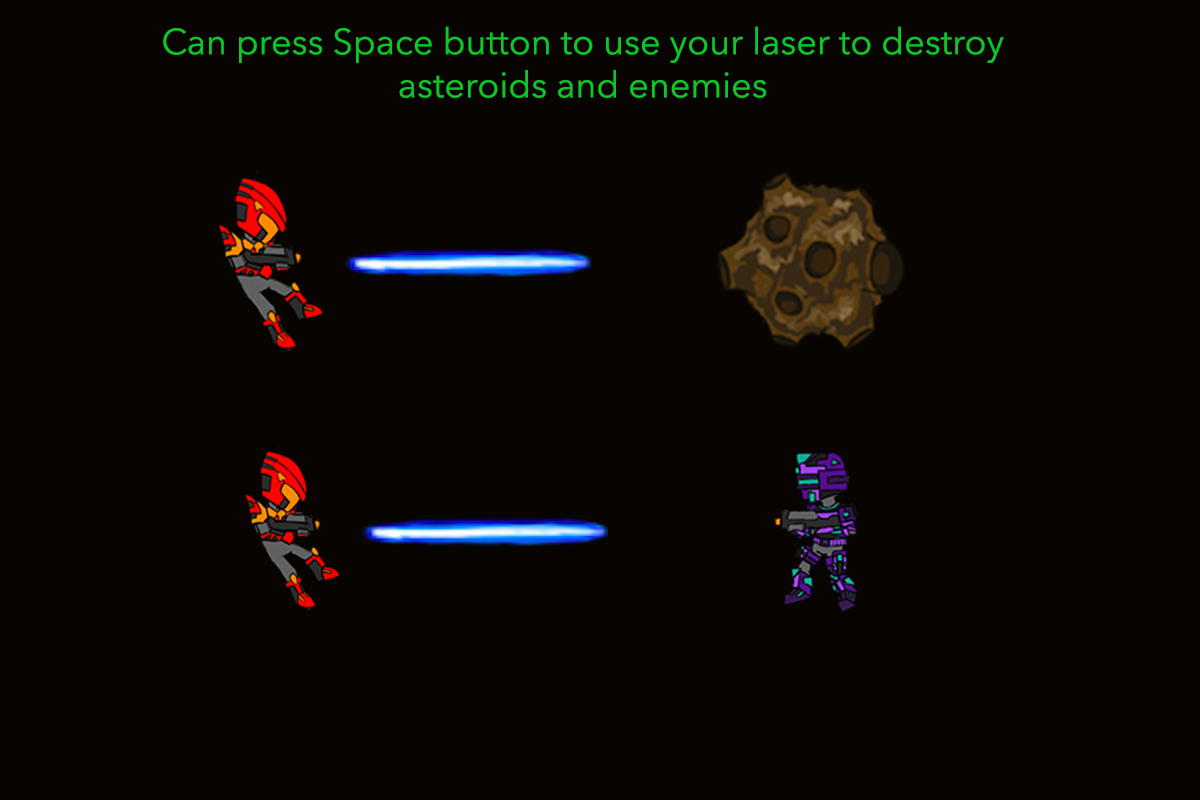
<style>
.page{position:relative;width:1200px;height:800px;background:#070401}
.page>*{position:absolute;margin:0}
.t1{font:36px "AvenirNext-Regular";color:#0cc727}
</style>
<div class="page">
<p class="t1" style="left:163px;top:26px;width:841px;height:72px;text-align:center">Can press Space button to use your laser to destroy <br>asteroids and enemies</p>
</div>
